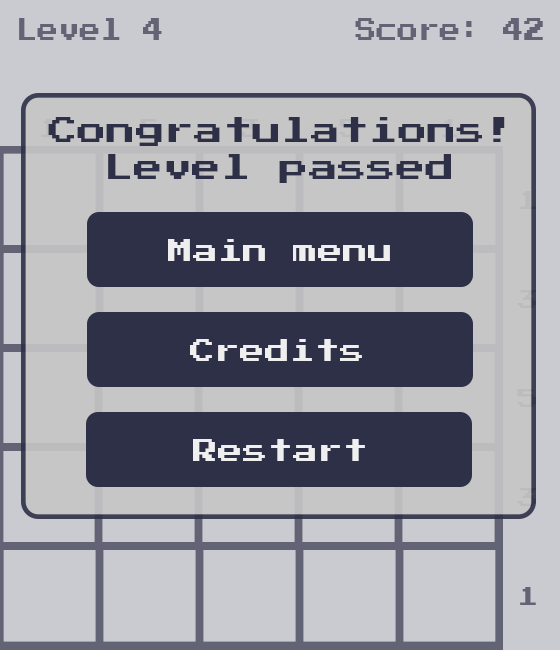
<style>
.page{position:relative;width:560px;height:650px;background:#cacbd1}
.page>*{position:absolute;margin:0}
.t1{font:25.7px "PressStart2P-Regular";color:#626475;scale:0.82 1}
.t2{font:29.2px "PressStart2P-Regular";color:#2d3047}
.t3{font:20.8px "PressStart2P-Regular"}
.t4{font:20.8px "PressStart2P-Regular";color:#bcbcbe}
.t5{font:25px "PressStart2P-Regular";color:#efefef}
.t6{font:20.8px "PressStart2P-Regular";color:#626475}
</style>
<div class="page">
<p class="t1" style="left:19px;top:18px;width:143px;height:22px">Level 4</p>
<p class="t1" style="left:355px;top:18px;width:188px;height:22px">Score: 42</p>
<p class="t2" style="left:48px;top:117px;width:457px;height:29px">Congratulations!</p>
<p class="t3" style="left:140px;top:119px;width:19px;height:18px">5</p>
<p class="t3" style="left:442px;top:119px;width:16px;height:18px">1</p>
<p class="t2" style="left:108px;top:154px;width:343px;height:29px">Level passed</p>
<p class="t4" style="left:520px;top:191px;width:16px;height:18px">1</p>
<p class="t5" style="left:168px;top:239px;width:222px;height:22px">Main menu</p>
<p class="t5" style="left:190px;top:339px;width:172px;height:22px">Credits</p>
<p class="t5" style="left:193px;top:439px;width:172px;height:22px">Restart</p>
<p class="t6" style="left:520px;top:587px;width:16px;height:18px">1</p>
</div>
